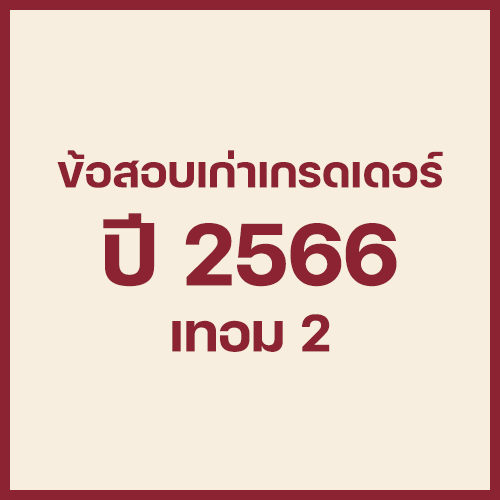
<style>
.page{position:relative;width:500px;height:500px;background:#f8eedf}
.page>*{position:absolute;margin:0}
.t1{font:60px "FCMinimalBold";color:#8b2332}
.t2{font:120px "FCMinimalBold";color:#8b2332}
.t3{font:72px "FCMinimalBold";color:#8b2332}
</style>
<div class="page">
<p class="t1" style="left:57px;top:150px;width:386px;height:38px">ข้อสอบเก่าเกรดเดอร์</p>
<p class="t2" style="left:103px;top:213px;width:294px;height:74px">ปี 2566</p>
<p class="t3" style="left:172px;top:314px;width:158px;height:38px">เทอม 2</p>
</div>
